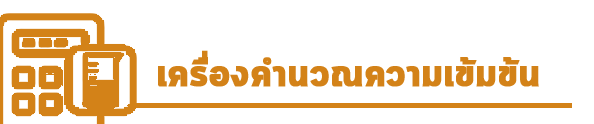
<style>
.page{position:relative;width:594px;height:124px;background:#ffffff}
.page>*{position:absolute;margin:0}
.t1{font:39.4px "Cloud-Bold";letter-spacing:-0.01em;color:#d38218;font-weight:bold}
</style>
<div class="page">
<p class="t1" style="left:158px;top:50px;width:381px;height:37px">เครื่องคำนวณความเข้มข้น</p>
</div>
